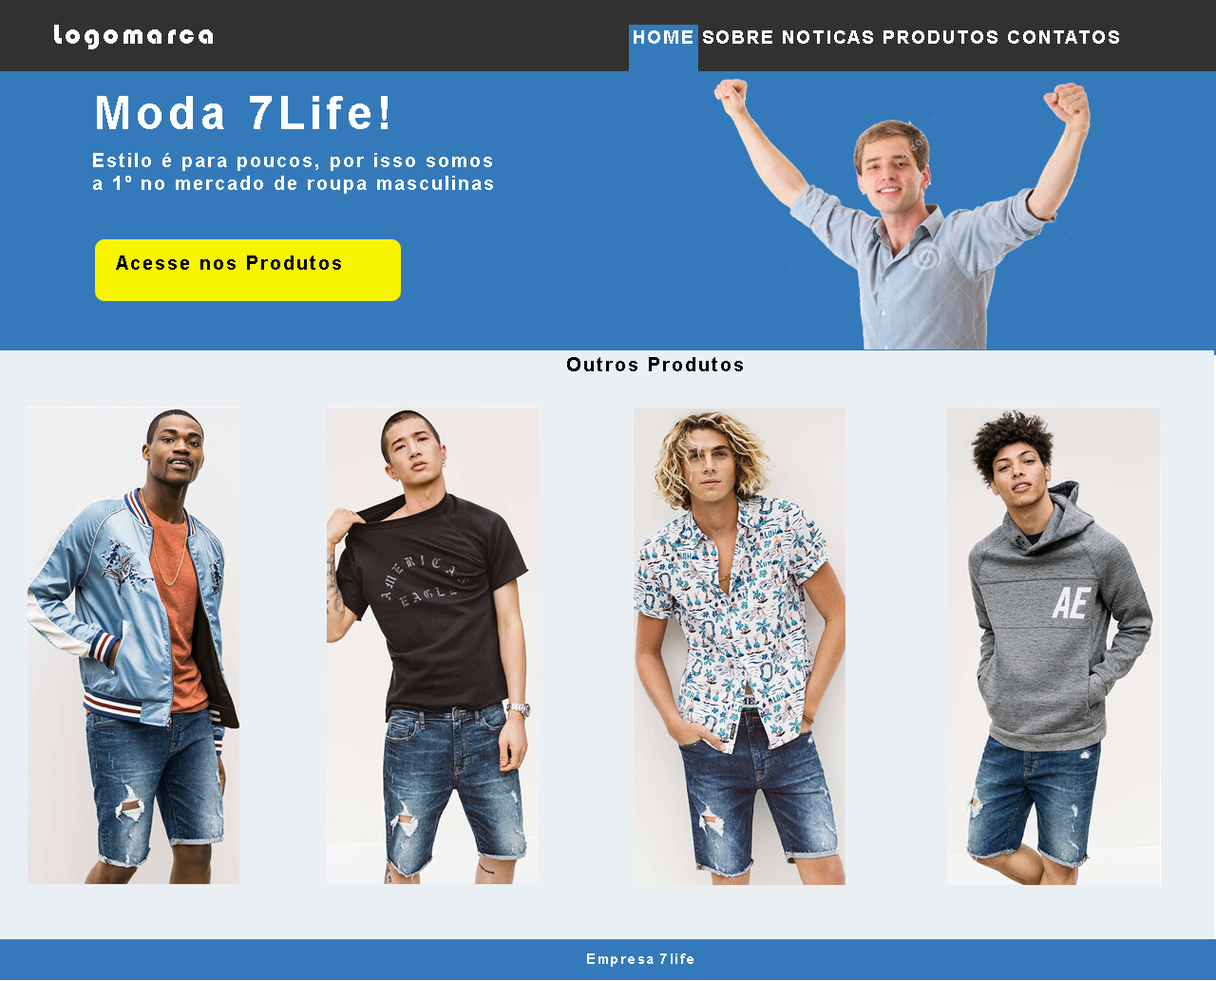
<style>
.page{position:relative;width:1216px;height:981px;background:#347aba}
.page>*{position:absolute;margin:0}
.t1{font:28.5px "Bauhaus93";letter-spacing:0.1em;color:#ffffff}
.t2{font:45.6px "Arial-BoldMT";letter-spacing:0.1em;color:#ffffff}
.t3{font:19px "Arial-BoldMT";letter-spacing:0.1em;color:#ffffff}
.t4{font:19px "Arial-BoldMT";letter-spacing:0.1em;color:#010101}
.t5{font:19px "Arial-BoldMT";letter-spacing:0.1em;color:#000000}
.t6{font:14.2px "Arial-BoldMT";letter-spacing:0.1em;color:#ffffff}
</style>
<div class="page">
<p class="t1" style="left:54px;top:25px;width:159px;height:24px">Logomarca</p>
<p class="t2" style="left:97px;top:96px;width:290px;height:33px">Moda 7Life!</p>
<p class="t3" style="left:93px;top:153px;width:400px;height:41px">Estilo é para poucos, por isso somos<br>a 1º no mercado de roupa masculinas</p>
<p class="t4" style="left:116px;top:255px;width:225px;height:15px">Acesse nos Produtos</p>
<p class="t5" style="left:567px;top:357px;width:176px;height:14px">Outros Produtos</p>
<p class="t6" style="left:587px;top:953px;width:106px;height:14px">Empresa 7life</p>
</div>
